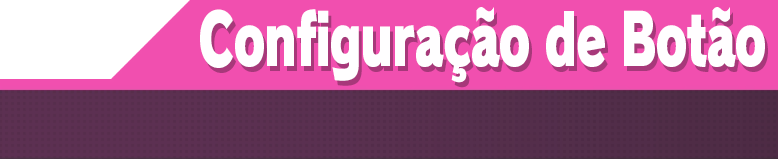
<style>
.page{position:relative;width:778px;height:160px;background:#f14faf}
.page>*{position:absolute;margin:0}
.t1{font:70.7px "RodinPro-UB";letter-spacing:-0.035em;color:#fffeff;scale:0.69 1}
</style>
<div class="page">
<p class="t1" style="left:200px;top:7px;width:565px;height:76px">Configuração de Botão</p>
</div>
